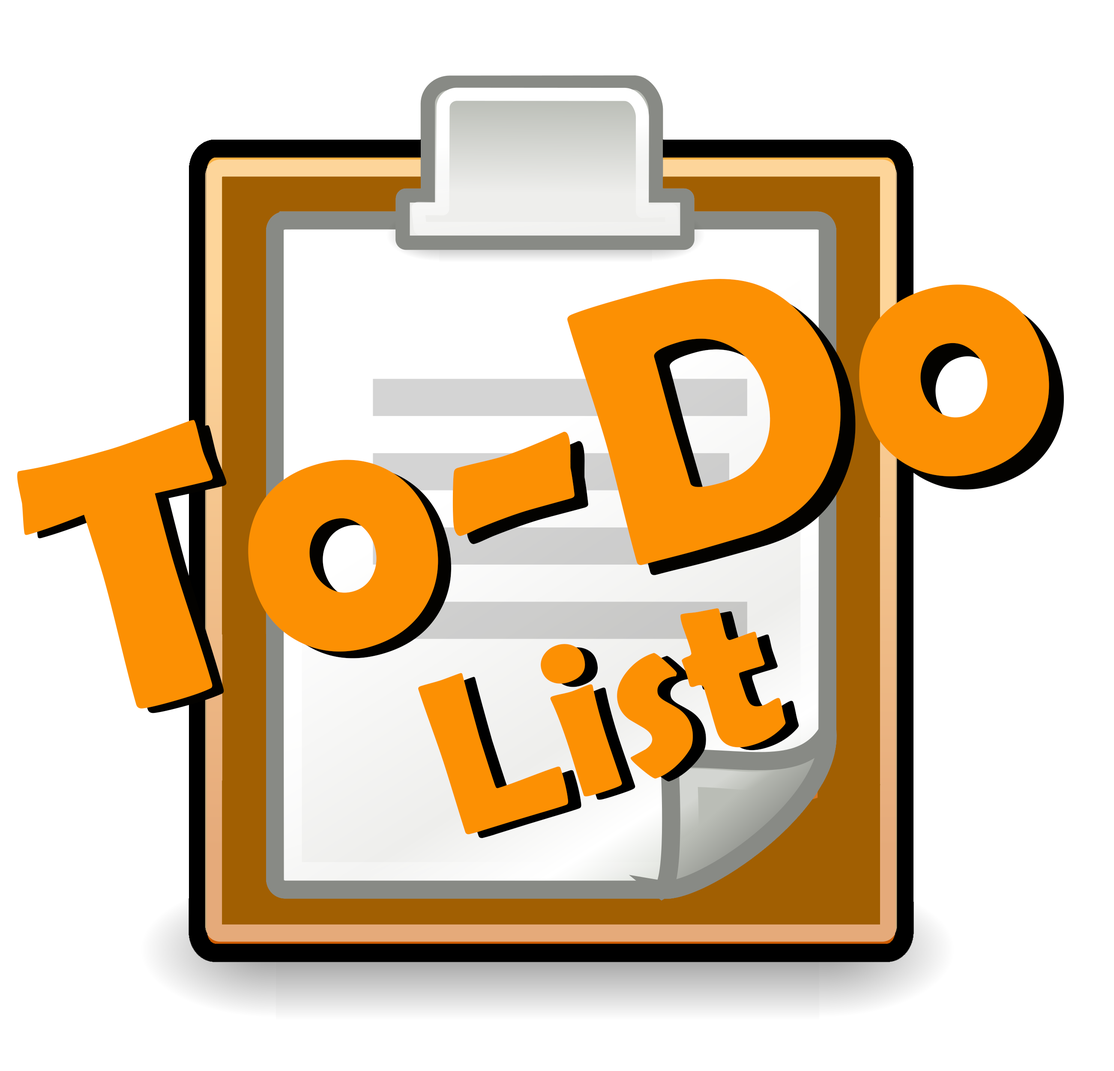
<style>
.page{position:relative;width:1114px;height:1071px;background:#ffffff}
.page>*{position:absolute;margin:0}
.t1{font:381.2px "BerlinSansFBDemi-Bold";color:#fc9003}
.t2{font:227.9px "BerlinSansFBDemi-Bold";color:#fc9003}
</style>
<div class="page">
<p class="t1" style="left:17px;top:279px;width:1032px;height:429px;rotate:-16deg">To-Do</p>
<p class="t1" style="left:31px;top:290px;width:1032px;height:423px;rotate:-15deg">To-Do</p>
<p class="t2" style="left:418px;top:608px;width:368px;height:226px;rotate:-18deg">List</p>
<p class="t2" style="left:431px;top:611px;width:368px;height:227px;rotate:-18deg">List</p>
</div>
